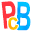
<style>
.page{position:relative;width:32px;height:32px;background:#ffffff}
.page>*{position:absolute;margin:0}
.t1{font:37.8px "ArialNarrow-Bold";color:#ff353f;scale:0.77 1}
.t2{font:39.7px "ArialNarrow-Bold";color:#00b3ff;scale:0.69 1}
.t3{font:23.6px "Arial-BoldMT";color:#ffc300;scale:0.85 1}
</style>
<div class="page">
<p class="t1" style="left:1px;top:1px;width:15px;height:28px;rotate:-6deg">P</p>
<p class="t2" style="left:16px;top:1px;width:15px;height:30px;rotate:2deg">B</p>
<p class="t3" style="left:8px;top:17px;width:10px;height:13px;rotate:-4deg">c</p>
</div>
